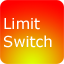
<style>
.page{position:relative;width:64px;height:64px}
.page>*{position:absolute;margin:0}
.t1{font:14.9px "Verdana";color:#ffffff}
</style>
<div class="page">
<p class="t1" style="left:4px;top:18px;width:48px;height:30px">Limit<br>Switch</p>
</div>
